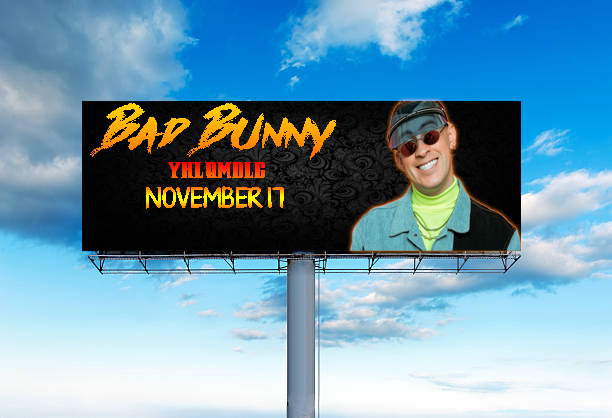
<style>
.page{position:relative;width:612px;height:418px}
.page>*{position:absolute;margin:0}
.t1{font:58px "Againts";scale:1.21 1}
.t2{font:17.2px "Pirate-Keg";scale:0.83 1}
.t3{font:22.3px "KGTurningTables"}
</style>
<div class="page">
<p class="t1" style="left:90px;top:103px;width:246px;height:57px">Bad Bunny</p>
<p class="t2" style="left:168px;top:162px;width:97px;height:16px">yhlqmdlg</p>
<p class="t3" style="left:146px;top:186px;width:138px;height:23px">NOVEMBER 17</p>
</div>
